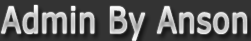
<style>
.page{position:relative;width:251px;height:41px;background:#333333}
.page>*{position:absolute;margin:0}
.t1{font:36px "Verdana";color:#d1d1d1;font-weight:bold;scale:0.8 1}
</style>
<div class="page">
<p class="t1" style="left:1px;top:5px;width:246px;height:36px">Admin By Anson</p>
</div>
